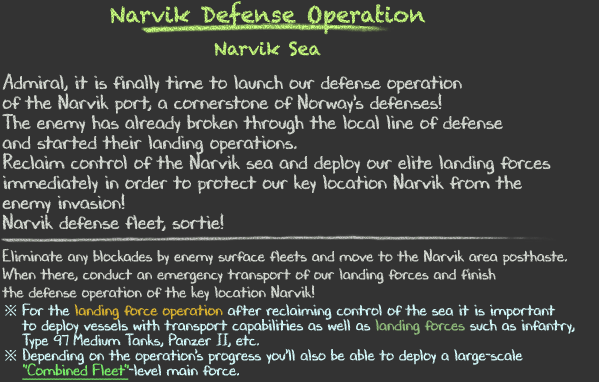
<style>
.page{position:relative;width:599px;height:382px;background:#333333}
.page>*{position:absolute;margin:0}
.t1{font:22px/36px "Chalkduster"}
.t2{font:18px/36px "Chalkduster"}
.t3{font:20px/20px "DJBChalkItUp";color:#d9ded6}
.t4{font:16px/18px "DJBChalkItUp";color:#d9ded6}
.t5{font:16px/15px "TimesNewRomanPSMT";color:#d7feff}
.t6{font:16px/15px "DJBChalkItUp";color:#d7feff}
.t7{font:16px/15px "DJBChalkItUp";color:#dfb731}
.t8{font:16px/15px "DJBChalkItUp";color:#93c07e}
.t9{font:16px/15px "DJBChalkItUp";color:#7bf26b;text-decoration:underline}
</style>
<div class="page">
<p class="t1" style="left:110px;top:1px;width:316px;height:56px;text-align:center">Narvik Defense Operation<br><span class="t2">Narvik Sea</span></p>
<p class="t3" style="left:2px;top:73px;width:573px;height:307px">Admiral, it is finally time to launch our defense operation<br>of the Narvik port, a cornerstone of Norway's defenses!<br>The enemy has already broken through the local line of defense<br>and started their landing operations.<br>Reclaim control of the Narvik sea and deploy our elite landing forces<br>immediately in order to protect our key location Narvik from the<br>enemy invasion!<br>Narvik defense fleet, sortie!<br><br><span class="t4">Eliminate any blockades by enemy surface fleets and move to the Narvik area posthaste.<br>When there, conduct an emergency transport of our landing forces and finish<br>the defense operation of the key location Narvik!<br></span><span class="t5">※ </span><span class="t6">For the </span><span class="t7">landing force operation</span><span class="t6"> after reclaiming control of the sea it is important<br>　 to deploy vessels with transport capabilities as well as </span><span class="t8">landing forces</span><span class="t6"> such as infantry,<br>　 Type 97 Medium Tanks, Panzer II, etc.<br></span><span class="t5">※ </span><span class="t6">Depending on the operation's progress you'll also be able to deploy a large-scale <br>　 </span><span class="t9">"Combined Fleet"</span><span class="t6">-level main force.</span></p>
</div>
